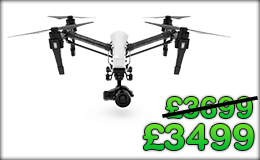
<style>
.page{position:relative;width:260px;height:160px;background:#ffffff}
.page>*{position:absolute;margin:0}
.t1{font:29px "HelveticaRounded-Bold";color:#000000}
.t2{font:37px "HelveticaRounded-Bold";color:#000000}
</style>
<div class="page">
<p class="t1" style="left:166px;top:97px;width:86px;height:21px">£3699</p>
<p class="t2" style="left:143px;top:124px;width:111px;height:26px">£3499</p>
</div>
